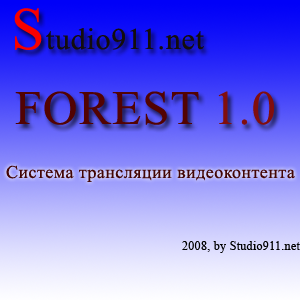
<style>
.page{position:relative;width:300px;height:300px}
.page>*{position:absolute;margin:0}
.t1{font:30px "TimesNewRomanPSMT";letter-spacing:0.025em;color:#140d0d}
.t2{font:60px "TimesNewRomanPSMT";letter-spacing:0.025em;color:#f80000}
.t3{font:48px "TimesNewRomanPSMT";letter-spacing:0.025em;color:#520303}
.t4{font:48px "TimesNewRomanPSMT";letter-spacing:0.025em;color:#810e0e}
.t5{font:18px "TimesNewRomanPSMT";letter-spacing:0.025em;color:#420606}
.t6{font:12px "TimesNewRomanPSMT";letter-spacing:0.025em;color:#000000}
</style>
<div class="page">
<p class="t1" style="left:14px;top:8px;width:190px;height:42px"><span class="t2">S</span>tudio911.net</p>
<p class="t3" style="left:15px;top:91px;width:259px;height:34px">FOREST <span class="t4">1.0</span></p>
<p class="t5" style="left:6px;top:165px;width:289px;height:17px">Система трансляции видеоконтента</p>
<p class="t6" style="left:182px;top:241px;width:118px;height:12px">2008, by Studio911.net</p>
</div>
